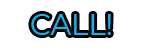
<style>
.page{position:relative;width:141px;height:51px;background:#ffffff}
.page>*{position:absolute;margin:0}
.t1{font:29.2px "Montserrat-Regular";color:#04b9f5}
</style>
<div class="page">
<p class="t1" style="left:31px;top:14px;width:80px;height:21px">CALL!</p>
</div>
